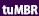
<style>
.page{position:relative;width:39px;height:16px;background:#37034d}
.page>*{position:absolute;margin:0}
.t1{font:11px "AdobeGothicStd-Bold";color:#ffffff;font-weight:bold}
</style>
<div class="page">
<p class="t1" style="left:2px;top:5px;width:36px;height:10px">tuMBR</p>
</div>
